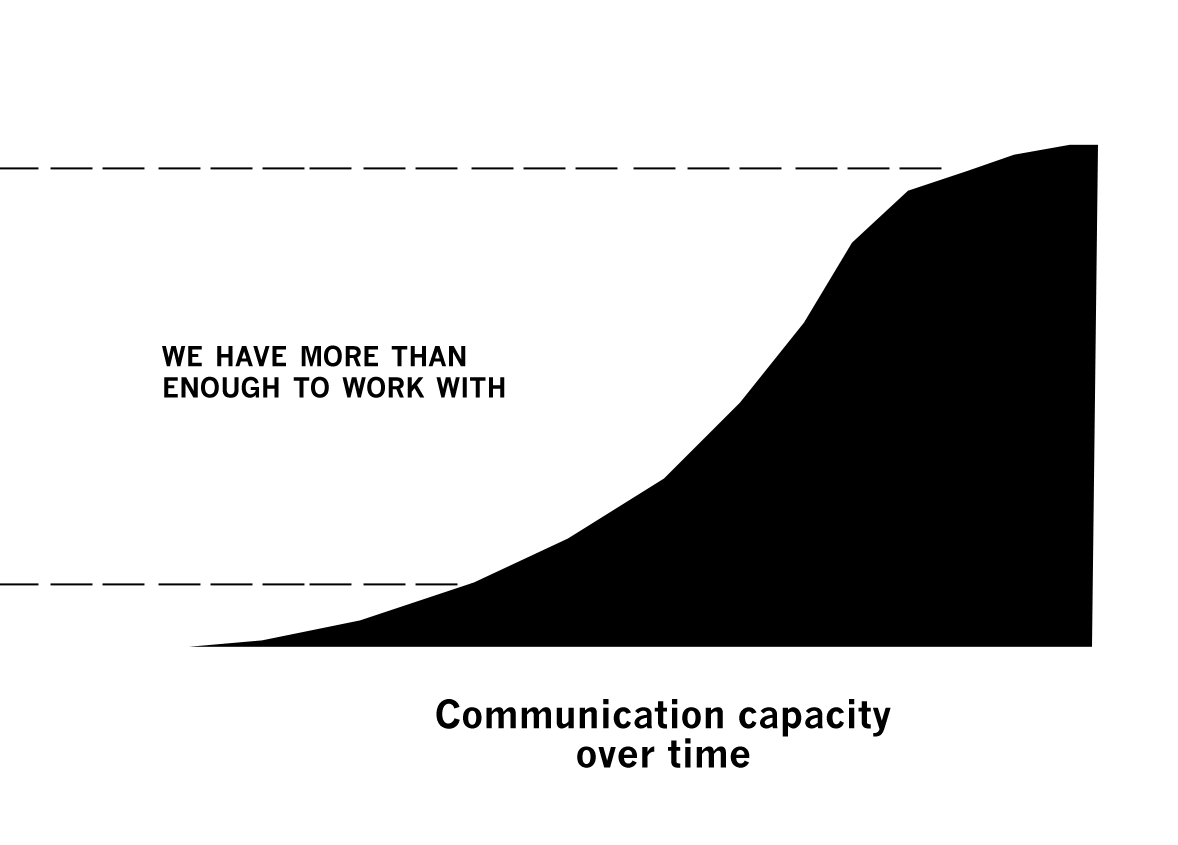
<style>
.page{position:relative;width:1178px;height:845px;background:#ffffff}
.page>*{position:absolute;margin:0}
.t1{font:38.5px/31.4px "NewsGothicMT-Bold";color:#000000;font-variant:small-caps}
.t2{font:38.5px/39.4px "NewsGothicMT-Bold";color:#000000}
</style>
<div class="page">
<p class="t1" style="left:162px;top:345px;width:343px;height:53px">we have more than <br>enough to work with</p>
<p class="t2" style="left:436px;top:699px;width:455px;height:69px;text-align:center">Communication capacity<br>over time</p>
</div>
